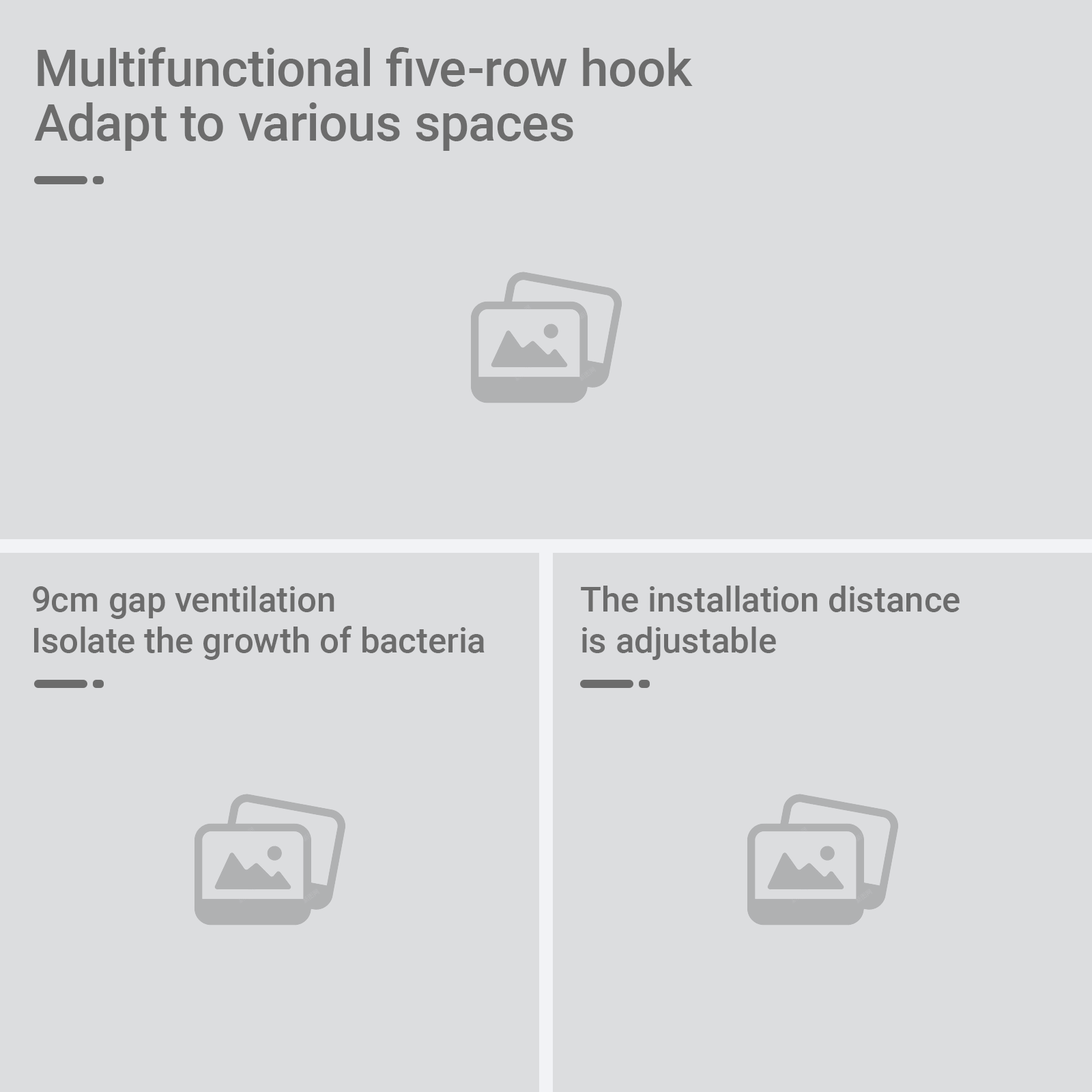
<style>
.page{position:relative;width:1092px;height:1092px;background:#dcdddf}
.page>*{position:absolute;margin:0}
.t1{font:51px/54.6px "Roboto-Medium";color:#6c6c6c}
.t2{font:34.9px/40.9px "Roboto-Medium";color:#6c6c6c}
</style>
<div class="page">
<p class="t1" style="left:34px;top:47px;width:659px;height:104px">Multifunctional five-row hook<br>Adapt to various spaces</p>
<p class="t2" style="left:33px;top:586px;width:452px;height:74px">9cm gap ventilation<br>Isolate the growth of bacteria</p>
<p class="t2" style="left:581px;top:586px;width:379px;height:74px">The installation distance <br>is adjustable</p>
</div>
